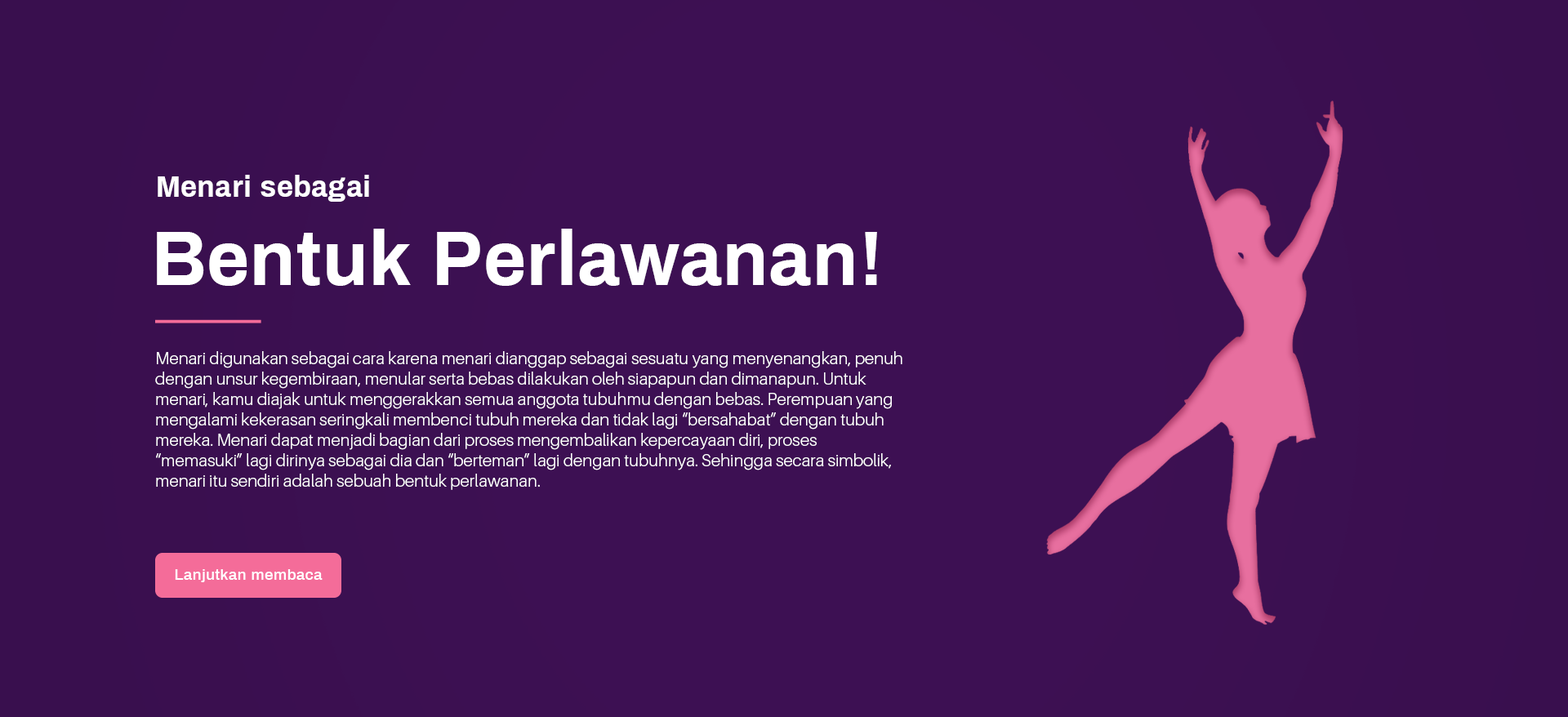
<style>
.page{position:relative;width:1568px;height:717px;background:#3d1053}
.page>*{position:absolute;margin:0}
.t1{font:29.8px "Archivo-Bold";color:#ffffff}
.t2{font:76.6px "Archivo-Bold";color:#ffffff}
.t3{font:17px "Aileron-Light";color:#ffffff}
</style>
<div class="page">
<p class="t1" style="left:158px;top:175px;width:211px;height:27px">Menari sebagai</p>
<p class="t2" style="left:157px;top:229px;width:720px;height:57px">Bentuk Perlawanan!</p>
<p class="t3" style="left:155px;top:351px;width:747px;height:139px">Menari digunakan sebagai cara karena menari dianggap sebagai sesuatu yang menyenangkan, penuh dengan unsur kegembiraan, menular serta bebas dilakukan oleh siapapun dan dimanapun. Untuk menari, kamu diajak untuk menggerakkan semua anggota tubuhmu dengan bebas. Perempuan yang mengalami kekerasan seringkali membenci tubuh mereka dan tidak lagi “bersahabat” dengan tubuh mereka. Menari dapat menjadi bagian dari proses mengembalikan kepercayaan diri, proses “memasuki” lagi dirinya sebagai dia dan “berteman” lagi dengan tubuhnya. Sehingga secara simbolik, menari itu sendiri adalah sebuah bentuk perlawanan.</p>
</div>
